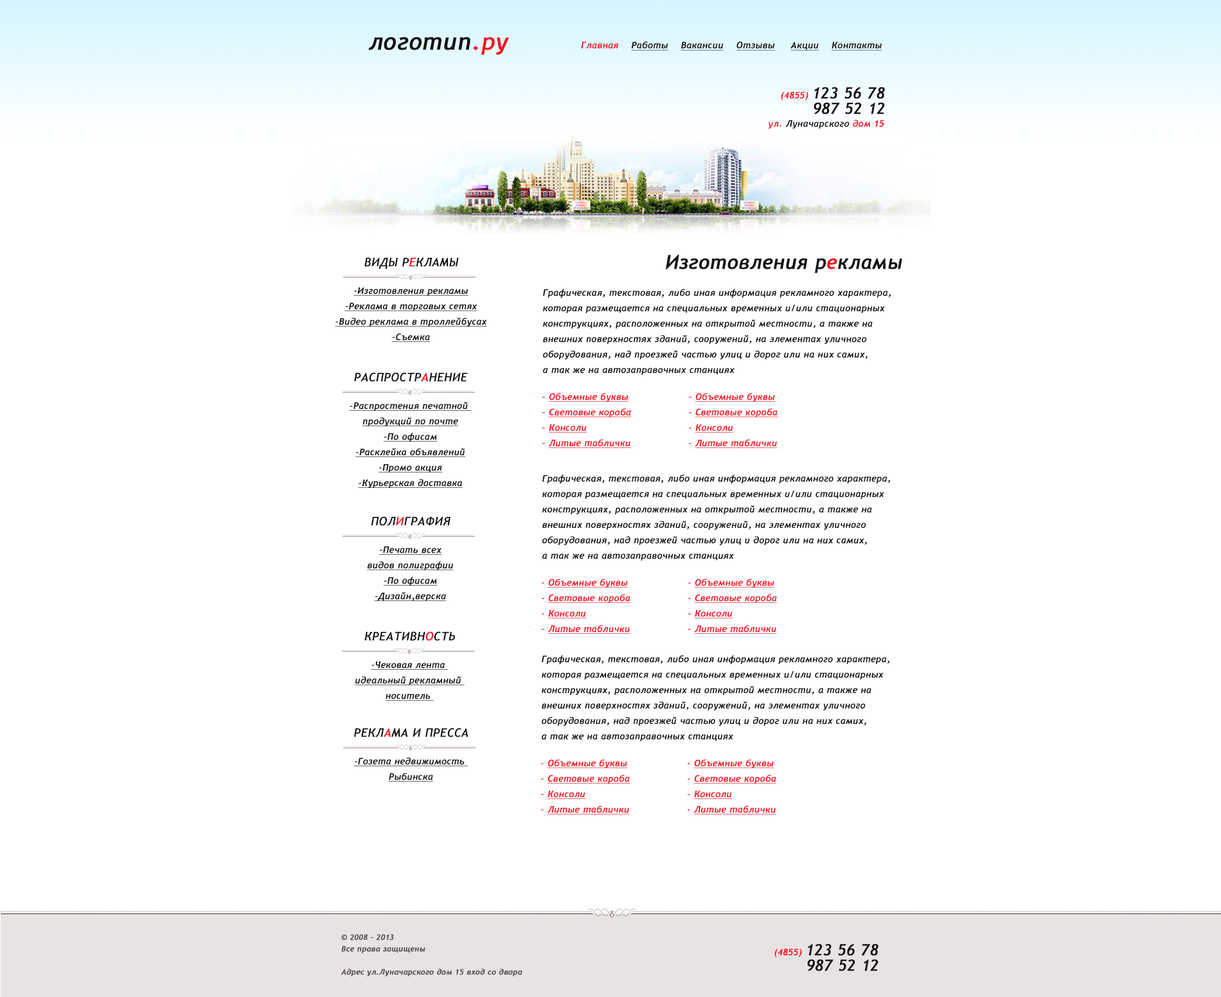
<style>
.page{position:relative;width:1221px;height:997px;background:#ffffff}
.page>*{position:absolute;margin:0}
.t1{font:23.1px "TrebuchetMS-Italic";letter-spacing:0.025em;color:#151112;font-weight:bold}
.t2{font:23.1px "TrebuchetMS-Italic";letter-spacing:0.025em;color:#f41323;font-weight:bold}
.t3{font:9px "TrebuchetMS-Italic";letter-spacing:0.025em;color:#151112;font-weight:bold;text-decoration:underline}
.t4{font:9px "TrebuchetMS-Italic";letter-spacing:0.025em;color:#f41323;font-weight:bold}
.t5{font:15.4px/15.4px "TrebuchetMS-Italic";letter-spacing:0.025em;color:#151112;font-weight:bold}
.t6{font:9px/15.4px "TrebuchetMS-Italic";letter-spacing:0.025em;color:#f41323;font-weight:bold}
.t7{font:9px "TrebuchetMS-Italic";letter-spacing:0.025em;color:#151112;font-weight:bold}
.t8{font:11.6px "TrebuchetMS-Italic";letter-spacing:0.025em;color:#151112;font-weight:bold}
.t9{font:11.6px "TrebuchetMS-Italic";letter-spacing:0.025em;color:#f41323;font-weight:bold}
.t10{font:19.3px "TrebuchetMS-Italic";letter-spacing:0.025em;color:#151112;font-weight:bold}
.t11{font:19.3px "TrebuchetMS-Italic";letter-spacing:0.025em;color:#f41323;font-weight:bold}
.t12{font:9px/15.4px "TrebuchetMS-Italic";letter-spacing:0.025em;color:#151112;font-weight:bold;text-decoration:underline}
.t13{font:9px/15.4px "TrebuchetMS-Italic";letter-spacing:0.025em;color:#151112;font-weight:bold}
.t14{font:9px/15.4px "TrebuchetMS-Italic";letter-spacing:0.025em;color:#f41323;font-weight:bold;text-decoration:underline}
.t15{font:7.7px/11.6px "TrebuchetMS-Italic";letter-spacing:0.025em;color:#584c4f;font-weight:bold}
</style>
<div class="page">
<p class="t1" style="left:368px;top:37px;width:141px;height:18px">логотип<span class="t2">.ру</span></p>
<p class="t3" style="left:581px;top:41px;width:302px;height:10px"><span class="t4">Главная    </span>Работы    Вакансии    Отзывы     Акции    Контакты</p>
<p class="t5" style="left:781px;top:87px;width:104px;height:27px;text-align:center"><span class="t6">(4855) </span>123 56 78<br>      987 52 12</p>
<p class="t7" style="left:768px;top:120px;width:117px;height:9px"><span class="t4">ул.</span> Луначарского <span class="t4">дом 15</span></p>
<p class="t8" style="left:364px;top:257px;width:95px;height:12px">ВИДЫ Р<span class="t9">Е</span>КЛАМЫ</p>
<p class="t10" style="left:666px;top:255px;width:237px;height:18px">Изготовления р<span class="t11">е</span>кламы</p>
<p class="t12" style="left:335px;top:287px;width:152px;height:55px;text-align:center"><span class="t6"><br></span>-Изготовления рекламы<br>-Реклама в торговых сетях<br>-Видео реклама в троллейбусах<br>-Съемка</p>
<p class="t13" style="left:543px;top:289px;width:348px;height:86px">Графическая, текстовая, либо иная информация рекламного характера, <br>которая размещается на специальных временных и/или стационарных <br>конструкциях, расположенных на открытой местности, а также на <br>внешних поверхностях зданий, сооружений, на элементах уличного <br>оборудования, над проезжей частью улиц и дорог или на них самих, <br>а так же на автозаправочных станциях</p>
<p class="t8" style="left:354px;top:372px;width:114px;height:10px">РАСПРОСТР<span class="t9">А</span>НЕНИЕ</p>
<p class="t12" style="left:349px;top:402px;width:123px;height:86px;text-align:center"><span class="t6"><br></span>-Распростения печатной <br>продукций по почте<br>-По офисам<br>-Расклейка объявлений<br>-Промо акция<br>-Курьерская доставка</p>
<p class="t14" style="left:543px;top:393px;width:88px;height:55px"><span class="t6">- </span>Объемные буквы<br><span class="t6">- </span>Световые короба<br><span class="t6">- </span>Консоли<br><span class="t6">- </span>Литые таблички</p>
<p class="t14" style="left:689px;top:393px;width:89px;height:55px"><span class="t6">- </span>Объемные буквы<br><span class="t6">- </span>Световые короба<br><span class="t6">- </span>Консоли<br><span class="t6">- </span>Литые таблички</p>
<p class="t13" style="left:543px;top:474px;width:347px;height:87px">Графическая, текстовая, либо иная информация рекламного характера, <br>которая размещается на специальных временных и/или стационарных <br>конструкциях, расположенных на открытой местности, а также на <br>внешних поверхностях зданий, сооружений, на элементах уличного <br>оборудования, над проезжей частью улиц и дорог или на них самих, <br>а так же на автозаправочных станциях</p>
<p class="t8" style="left:371px;top:516px;width:80px;height:10px">ПОЛ<span class="t9">И</span>ГРАФИЯ</p>
<p class="t12" style="left:367px;top:546px;width:87px;height:55px;text-align:center"><span class="t6"><br></span>-Печать всех<br>видов полиграфии<br>-По офисам<br>-Дизайн,верска</p>
<p class="t14" style="left:542px;top:579px;width:89px;height:55px"><span class="t6">- </span>Объемные буквы<br><span class="t6">- </span>Световые короба<br><span class="t6">- </span>Консоли<br><span class="t6">- </span>Литые таблички</p>
<p class="t14" style="left:688px;top:579px;width:89px;height:55px"><span class="t6">- </span>Объемные буквы<br><span class="t6">- </span>Световые короба<br><span class="t6">- </span>Консоли<br><span class="t6">- </span>Литые таблички</p>
<p class="t8" style="left:364px;top:631px;width:91px;height:10px">КРЕАТИВН<span class="t9">О</span>СТЬ</p>
<p class="t12" style="left:355px;top:662px;width:110px;height:39px;text-align:center"><span class="t6"><br></span>-Чековая лента <br>идеальный рекламный <br>носитель</p>
<p class="t13" style="left:542px;top:655px;width:348px;height:86px">Графическая, текстовая, либо иная информация рекламного характера, <br>которая размещается на специальных временных и/или стационарных <br>конструкциях, расположенных на открытой местности, а также на <br>внешних поверхностях зданий, сооружений, на элементах уличного <br>оборудования, над проезжей частью улиц и дорог или на них самих, <br>а так же на автозаправочных станциях</p>
<p class="t8" style="left:354px;top:728px;width:115px;height:9px">РЕКЛ<span class="t9">А</span>МА И ПРЕССА</p>
<p class="t12" style="left:354px;top:757px;width:115px;height:25px;text-align:center"><span class="t6"><br></span>-Гозета недвижимость <br>Рыбинска</p>
<p class="t14" style="left:541px;top:759px;width:89px;height:56px"><span class="t6">- </span>Объемные буквы<br><span class="t6">- </span>Световые короба<br><span class="t6">- </span>Консоли<br><span class="t6">- </span>Литые таблички</p>
<p class="t14" style="left:688px;top:759px;width:89px;height:56px"><span class="t6">- </span>Объемные буквы<br><span class="t6">- </span>Световые короба<br><span class="t6">- </span>Консоли<br><span class="t6">- </span>Литые таблички</p>
<p class="t15" style="left:341px;top:934px;width:182px;height:43px">© 2008 - 2013 <br>Все права защищены<br><br>Адрес ул.Луначарского дом 15 вход со двора</p>
<p class="t5" style="left:775px;top:944px;width:104px;height:27px;text-align:center"><span class="t6">(4855) </span>123 56 78<br>      987 52 12</p>
</div>
